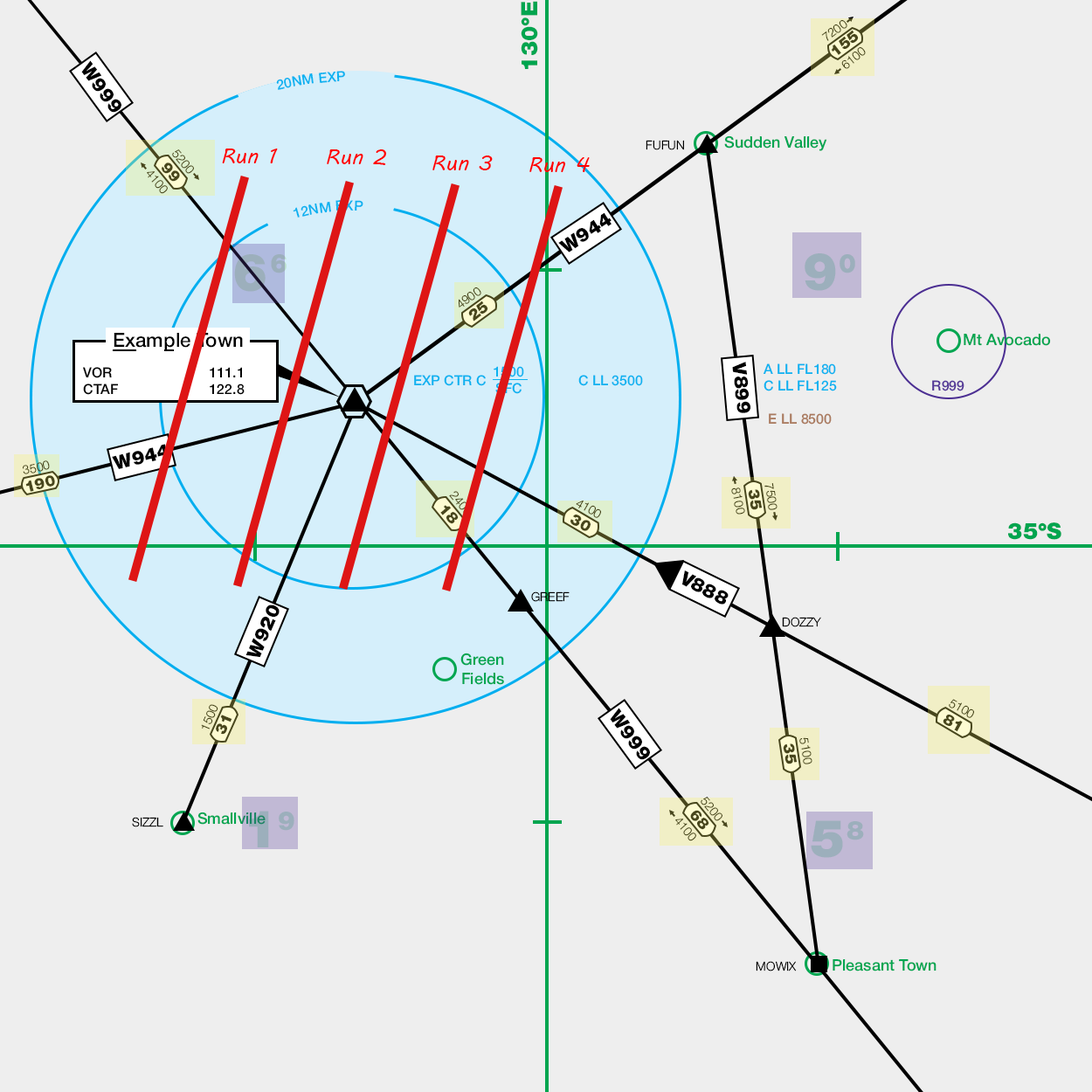
<style>
.page{position:relative;width:1092px;height:1092px;background:#eeeeee}
.page>*{position:absolute;margin:0}
.t1{font:22.7px "HelveticaNeue-Black";color:#00a54f}
.t2{font:12.2px "HelveticaNeue-Light";color:#48461d}
.t3{font:15.7px "HelveticaNeue-Black";color:#48461d}
.t4{font:19.2px "HelveticaNeue-Black";color:#000000}
.t5{font:14px "HelveticaNeue-Medium";color:#0cb2f0}
.t6{font:15.7px "HelveticaNeue-Medium";color:#03a651}
.t7{font:21px "MVBoli";color:#ff0000}
.t8{font:12.2px "HelveticaNeue-Light";color:#000000}
.t9{font:26.2px "HelveticaNeue-Black";color:#9cafbc}
.t10{font:52.4px "HelveticaNeue-Black";color:#9cafbc}
.t11{font:19.6px "HelveticaNeue-Medium";color:#000000}
.t12{font:14px "HelveticaNeue-Medium";color:#aa7a5e}
.t13{font:14px "HelveticaNeue-Medium";color:#000000}
.t14{font:14px "HelveticaNeue-Medium"}
.t15{font:14px "HelveticaNeue-Medium";color:#533797}
.t16{font:12.2px "HelveticaNeue-Light"}
.t17{font:15.7px "HelveticaNeue-Medium"}
</style>
<div class="page">
<p class="t1" style="left:521px;top:1px;width:17px;height:68px;rotate:-90deg">130°E</p>
<p class="t2" style="left:821px;top:20px;width:26px;height:21px;rotate:-37deg">7200</p>
<p class="t3" style="left:831px;top:30px;width:28px;height:25px;rotate:-38deg">155</p>
<p class="t2" style="left:841px;top:47px;width:25px;height:22px;rotate:-39deg">6100</p>
<p class="t4" style="left:81px;top:60px;width:40px;height:53px;rotate:53deg">W999</p>
<p class="t5" style="left:276px;top:71px;width:69px;height:19px;rotate:3deg">20NM EXP</p>
<p class="t6" style="left:724px;top:135px;width:103px;height:16px">Sudden Valley</p>
<p class="t2" style="left:172px;top:149px;width:22px;height:25px;rotate:50deg">5200</p>
<p class="t7" style="left:222px;top:149px;width:56px;height:14px">Run 1</p>
<p class="t7" style="left:327px;top:149px;width:60px;height:16px">Run 2</p>
<p class="t8" style="left:646px;top:140px;width:38px;height:10px">FUFUN</p>
<p class="t7" style="left:432px;top:155px;width:61px;height:15px">Run 3</p>
<p class="t7" style="left:529px;top:157px;width:61px;height:15px">Run 4</p>
<p class="t2" style="left:147px;top:171px;width:21px;height:23px;rotate:49deg">4100</p>
<p class="t3" style="left:162px;top:162px;width:18px;height:20px;rotate:49deg">99</p>
<p class="t5" style="left:293px;top:200px;width:70px;height:18px;rotate:180deg">12NM EXP</p>
<p class="t4" style="left:558px;top:212px;width:54px;height:40px;rotate:-33deg">W944</p>
<p class="t9" style="left:271px;top:254px;width:16px;height:19px">6</p>
<p class="t10" style="left:805px;top:253px;width:31px;height:38px">9</p>
<p class="t9" style="left:840px;top:254px;width:15px;height:19px">0</p>
<p class="t2" style="left:459px;top:287px;width:22px;height:21px;rotate:-37deg">4900</p>
<p class="t3" style="left:468px;top:301px;width:20px;height:20px;rotate:-38deg">25</p>
<p class="t11" style="left:114px;top:333px;width:129px;height:18px">Example Town</p>
<p class="t6" style="left:964px;top:334px;width:87px;height:12px">Mt Avocado</p>
<p class="t4" style="left:732px;top:362px;width:18px;height:51px;rotate:84deg">V899</p>
<p class="t5" style="left:763px;top:363px;width:74px;height:62px;text-align:center">A LL FL180<br>C LL FL125<br><br><span class="t12">E LL 8500</span></p>
<p class="t13" style="left:83px;top:367px;width:162px;height:28px;text-align:center">VOR    111.1<br>CTAF   122.8</p>
<p class="t5" style="left:414px;top:375px;width:72px;height:11px">EXP CTR C</p>
<p class="t5" style="left:494px;top:366px;width:30px;height:11px">1500</p>
<p class="t5" style="left:578px;top:375px;width:65px;height:11px">C LL 3500</p>
<p class="t14" style="left:495px;top:383px;width:27px;height:11px">SFC</p>
<p class="t15" style="left:932px;top:380px;width:32px;height:11px">R999</p>
<p class="t4" style="left:112px;top:444px;width:57px;height:25px;rotate:-14deg">W944</p>
<p class="t2" style="left:23px;top:460px;width:27px;height:14px;rotate:-13deg">3500</p>
<p class="t3" style="left:25px;top:475px;width:30px;height:17px;rotate:-14deg">190</p>
<p class="t2" style="left:764px;top:483px;width:13px;height:27px;rotate:80deg">7500</p>
<p class="t16" style="left:449px;top:491px;width:23px;height:24px;rotate:50deg">2400</p>
<p class="t2" style="left:731px;top:487px;width:14px;height:28px;rotate:79deg">8100</p>
<p class="t3" style="left:748px;top:489px;width:15px;height:21px;rotate:79deg">35</p>
<p class="t3" style="left:440px;top:505px;width:19px;height:19px;rotate:49deg">18</p>
<p class="t2" style="left:576px;top:500px;width:25px;height:18px;rotate:30deg">4100</p>
<p class="t3" style="left:570px;top:515px;width:21px;height:16px;rotate:29deg">30</p>
<p class="t1" style="left:1008px;top:522px;width:53px;height:18px">35°S</p>
<p class="t4" style="left:682px;top:570px;width:47px;height:35px;rotate:27deg">V888</p>
<p class="t8" style="left:531px;top:591px;width:39px;height:11px">GREEF</p>
<p class="t4" style="left:245px;top:605px;width:35px;height:53px;rotate:-67deg">W920</p>
<p class="t8" style="left:782px;top:617px;width:39px;height:10px">DOZZY</p>
<p class="t6" style="left:460px;top:653px;width:44px;height:32px;text-align:center">Green<br>Fields</p>
<p class="t2" style="left:949px;top:699px;width:25px;height:19px;rotate:30deg">5100</p>
<p class="t2" style="left:201px;top:704px;width:17px;height:25px;rotate:-67deg">1500</p>
<p class="t4" style="left:610px;top:708px;width:40px;height:52px;rotate:53deg">W999</p>
<p class="t3" style="left:216px;top:715px;width:16px;height:20px;rotate:-68deg">31</p>
<p class="t3" style="left:943px;top:715px;width:20px;height:17px;rotate:29deg">81</p>
<p class="t2" style="left:799px;top:737px;width:13px;height:27px;rotate:80deg">5100</p>
<p class="t3" style="left:783px;top:743px;width:15px;height:21px;rotate:79deg">35</p>
<p class="t2" style="left:701px;top:797px;width:21px;height:24px;rotate:50deg">5200</p>
<p class="t3" style="left:690px;top:810px;width:19px;height:20px;rotate:49deg">68</p>
<p class="t8" style="left:132px;top:817px;width:31px;height:10px">SIZZL</p>
<p class="t17" style="left:197px;top:812px;width:69px;height:13px">Smallville</p>
<p class="t10" style="left:249px;top:811px;width:20px;height:36px">1</p>
<p class="t9" style="left:279px;top:812px;width:15px;height:19px">9</p>
<p class="t2" style="left:675px;top:819px;width:21px;height:22px;rotate:49deg">4100</p>
<p class="t10" style="left:811px;top:820px;width:32px;height:38px">5</p>
<p class="t9" style="left:847px;top:821px;width:17px;height:19px">8</p>
<p class="t8" style="left:756px;top:961px;width:41px;height:10px">MOWIX</p>
<p class="t6" style="left:833px;top:959px;width:103px;height:12px">Pleasant Town</p>
</div>
